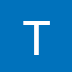
<style>
.page{position:relative;width:72px;height:72px;background:#0072bc}
.page>*{position:absolute;margin:0}
.t1{font:46.7px "TrebuchetMS";color:#ffffff}
</style>
<div class="page">
<p class="t1" style="left:23px;top:21px;width:27px;height:34px">T</p>
</div>
